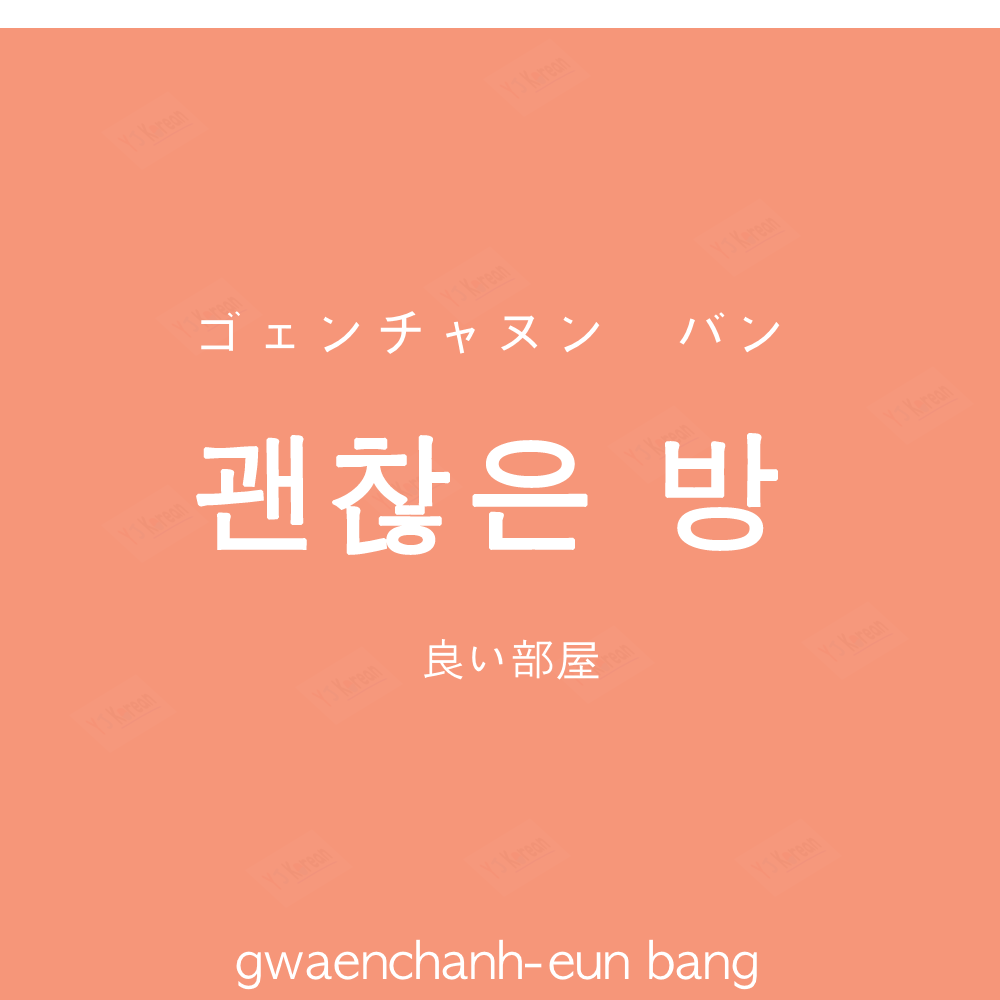
<style>
.page{position:relative;width:1000px;height:1000px;background:#f69679}
.page>*{position:absolute;margin:0}
.t1{font:60px "AppleGothic";color:#ffffff}
.t2{font:130px "AppleGothic";letter-spacing:0.04em;color:#ffffff;font-weight:bold}
.t3{font:45px "AppleGothic";color:#ffffff}
.t4{font:50px "AppleGothic";color:#ffffff}
</style>
<div class="page">
<p class="t1" style="left:201px;top:311px;width:579px;height:43px">ゴェンチャヌン　バン</p>
<p class="t2" style="left:196px;top:433px;width:582px;height:122px">괜찮은 방</p>
<p class="t3" style="left:424px;top:639px;width:175px;height:41px">良い部屋</p>
<p class="t4" style="left:236px;top:939px;width:521px;height:51px">gwaenchanh-eun bang</p>
</div>
